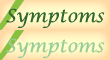
<style>
.page{position:relative;width:110px;height:60px}
.page>*{position:absolute;margin:0}
.t1{font:18px "LucidaCalligraphy-Italic";color:#336633}
.t2{font:18px "LucidaCalligraphy-Italic";color:#99cc99}
</style>
<div class="page">
<p class="t1" style="left:6px;top:8px;width:99px;height:20px">Symptoms</p>
<p class="t2" style="left:6px;top:38px;width:99px;height:20px">Symptoms</p>
</div>
